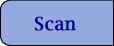
<style>
.page{position:relative;width:114px;height:46px;background:#94aade}
.page>*{position:absolute;margin:0}
.t1{font:18px "LucidaBright";color:#000084;font-weight:bold}
</style>
<div class="page">
<p class="t1" style="left:35px;top:16px;width:42px;height:15px">Scan</p>
</div>
